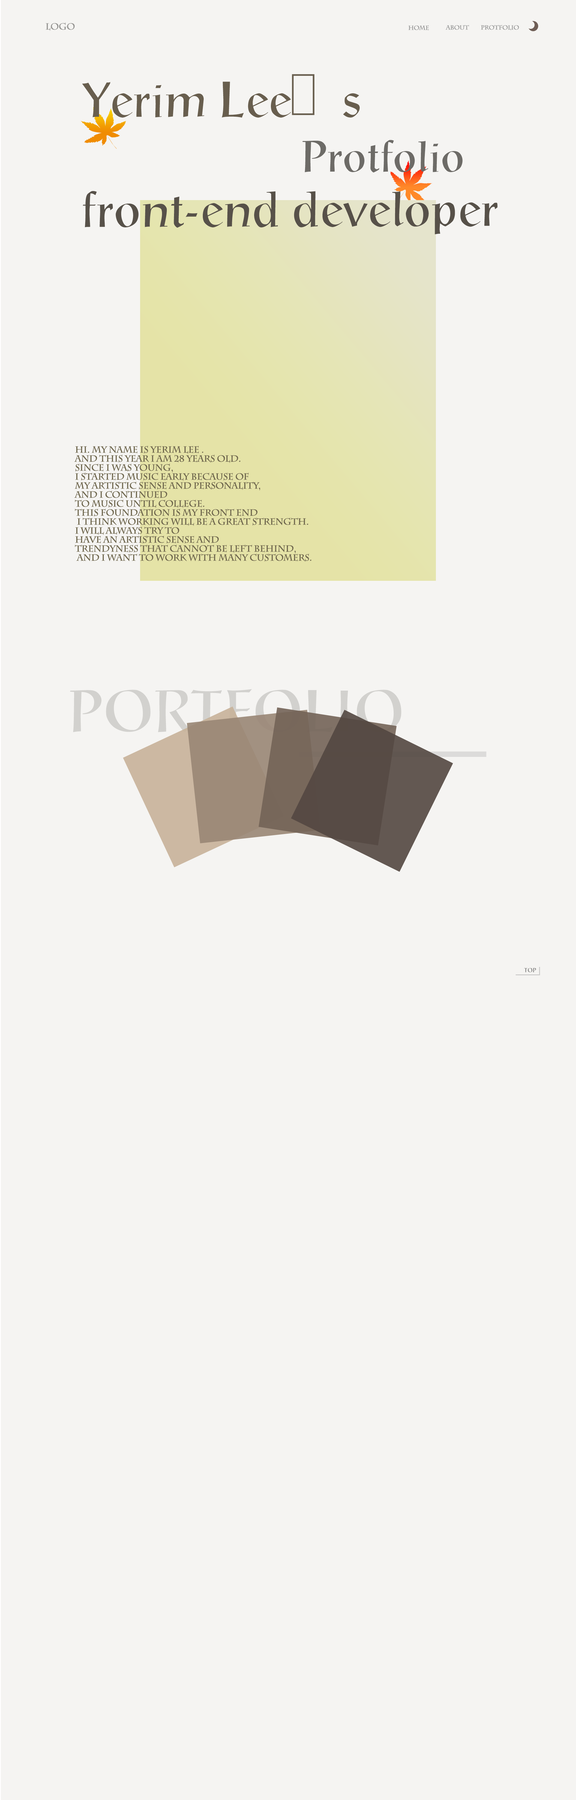
<style>
.page{position:relative;width:576px;height:1800px;background:#f5f4f2}
.page>*{position:absolute;margin:0}
.t1{font:9px "CharlemagneStd-Bold";letter-spacing:-0.025em;color:#949391}
.t2{font:6px "CharlemagneStd-Bold";letter-spacing:-0.025em;color:#979797}
.t3{font:51px "TSTNamr";letter-spacing:-0.025em;color:#685e4e}
.t4{font:45px "TSTNamr";letter-spacing:-0.025em;color:#6d6b67}
.t5{font:51px "TSTNamr";letter-spacing:-0.025em;color:#575149}
.t6{font:9px/9px "CharlemagneStd-Bold";letter-spacing:-0.025em;color:#6f674d}
.t7{font:6px "TSTNamr";letter-spacing:-0.025em;color:#838382}
</style>
<div class="page">
<p class="t1" style="left:46px;top:22px;width:29px;height:9px">LOGO</p>
<p class="t2" style="left:408px;top:25px;width:21px;height:6px">home</p>
<p class="t2" style="left:446px;top:25px;width:23px;height:5px">about</p>
<p class="t2" style="left:481px;top:25px;width:38px;height:6px">PROTFOLIO</p>
<p class="t3" style="left:82px;top:74px;width:278px;height:44px">Yerim Lee’s</p>
<p class="t4" style="left:302px;top:140px;width:161px;height:32px">Protfolio</p>
<p class="t5" style="left:83px;top:191px;width:415px;height:43px">front-end developer</p>
<p class="t6" style="left:74px;top:446px;width:237px;height:116px">Hi. My name is Yerim Lee .<br>and this year I am 28 years old.<br>Since I was young, <br>I started music early because of <br>my artistic sense and personality, <br>and I continued <br>to music until college. <br>This foundation is my front end<br> I think working will be a great strength. <br>I will always try to <br>have an artistic sense and <br>trendyness that cannot be left behind,<br> and I want to work with many customers.</p>
<p class="t7" style="left:524px;top:968px;width:12px;height:4px">TOP</p>
</div>
